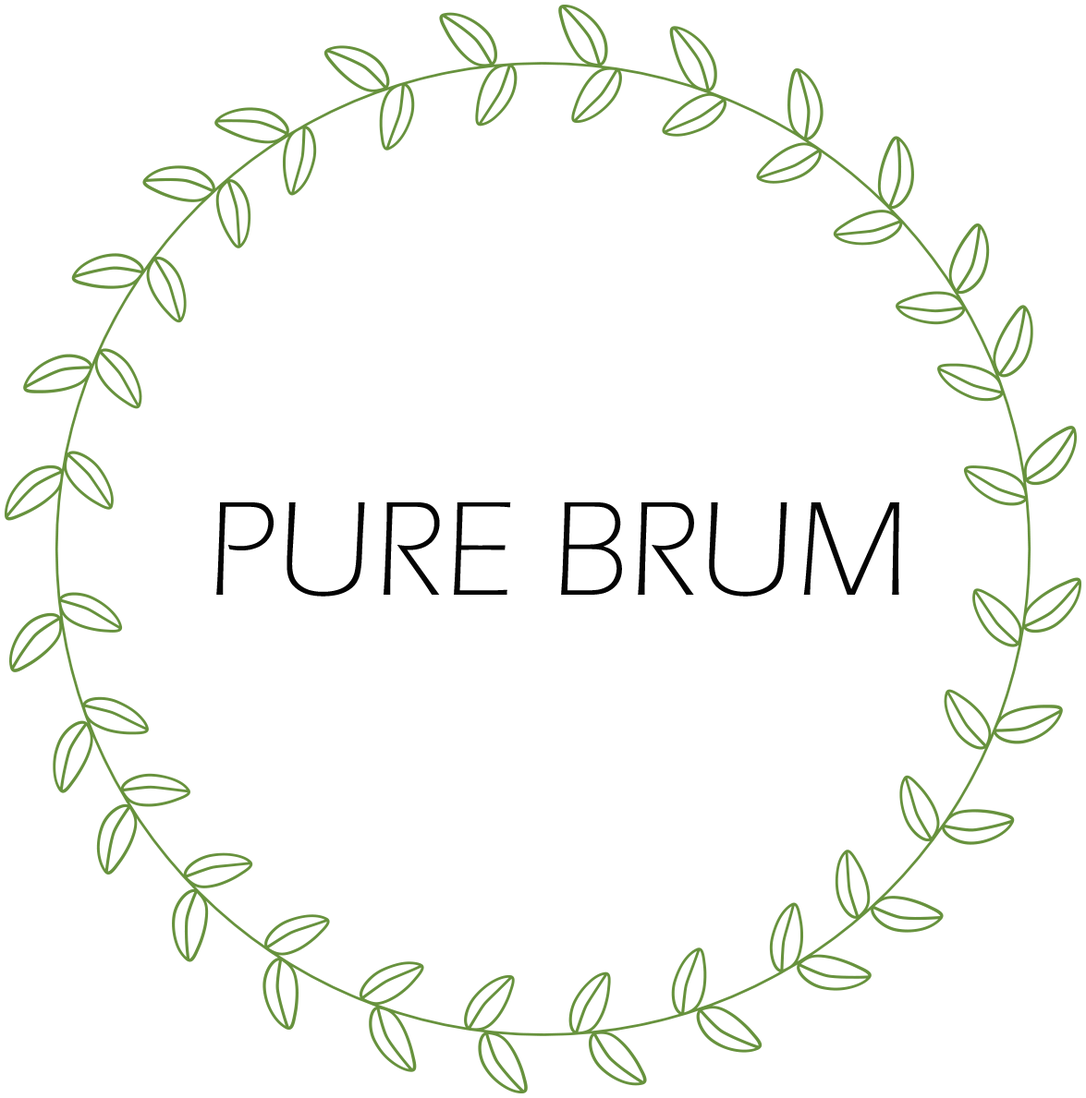
<style>
.page{position:relative;width:1086px;height:1098px;background:#ffffff}
.page>*{position:absolute;margin:0}
.t1{font:138.6px "ErasITC-Light";color:#040404}
</style>
<div class="page">
<p class="t1" style="left:216px;top:503px;width:683px;height:94px">PURE BRUM</p>
</div>
